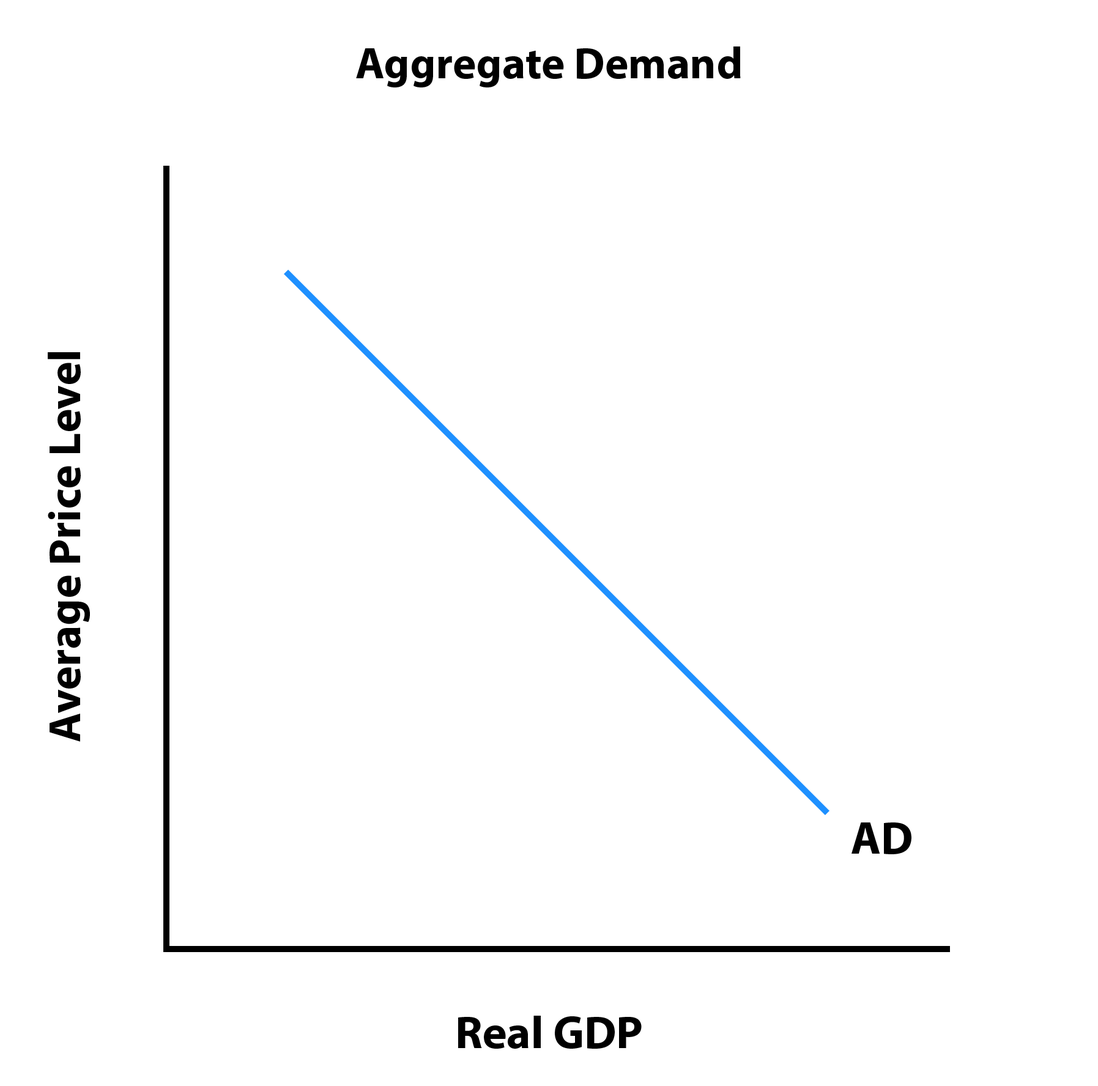
<style>
.page{position:relative;width:1098px;height:1086px;background:#ffffff}
.page>*{position:absolute;margin:0}
.t1{font:44.5px "MyriadPro-Bold";color:#000000}
.t2{font:45.6px "MyriadPro-Bold";color:#000000}
.t3{font:45.9px "MyriadPro-Bold";color:#000000}
</style>
<div class="page">
<p class="t1" style="left:356px;top:46px;width:385px;height:41px">Aggregate Demand</p>
<p class="t2" style="left:48px;top:352px;width:42px;height:390px;rotate:-90deg">Average Price Level</p>
<p class="t3" style="left:851px;top:823px;width:60px;height:31px">AD</p>
<p class="t3" style="left:458px;top:1016px;width:184px;height:33px">Real GDP</p>
</div>
